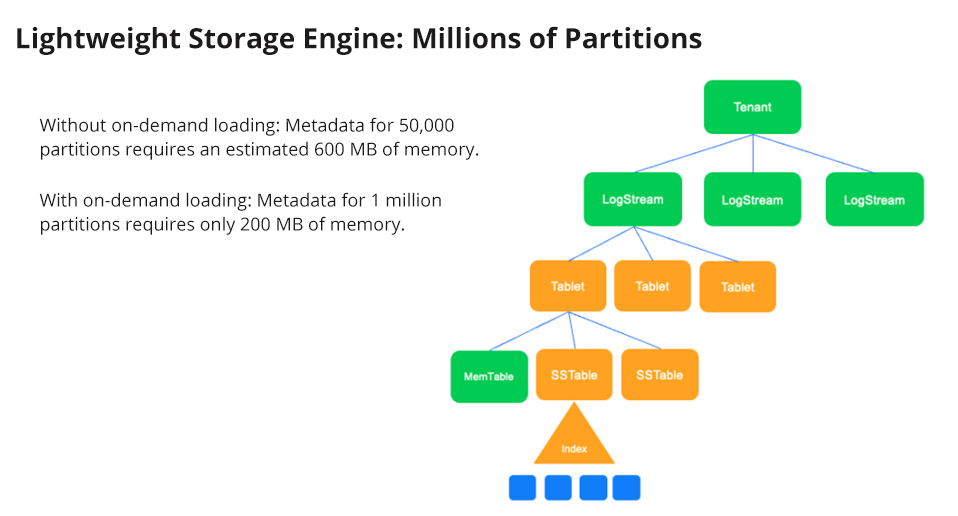
<style>
.page{position:relative;width:958px;height:516px;background:#ffffff}
.page>*{position:absolute;margin:0}
.t1{font:28px "OpenSans-Bold";color:#1c1a1a}
.t2{font:18px/24px "OpenSans";color:#1c1a1a}
</style>
<div class="page">
<p class="t1" style="left:17px;top:26px;width:685px;height:29px">Lightweight Storage Engine: Millions of Partitions</p>
<p class="t2" style="left:39px;top:117px;width:440px;height:43px">Without on-demand loading: Metadata for 50,000 partitions requires an estimated 600 MB of memory.</p>
<p class="t2" style="left:39px;top:192px;width:402px;height:43px">With on-demand loading: Metadata for 1 million partitions requires only 200 MB of memory.</p>
</div>
